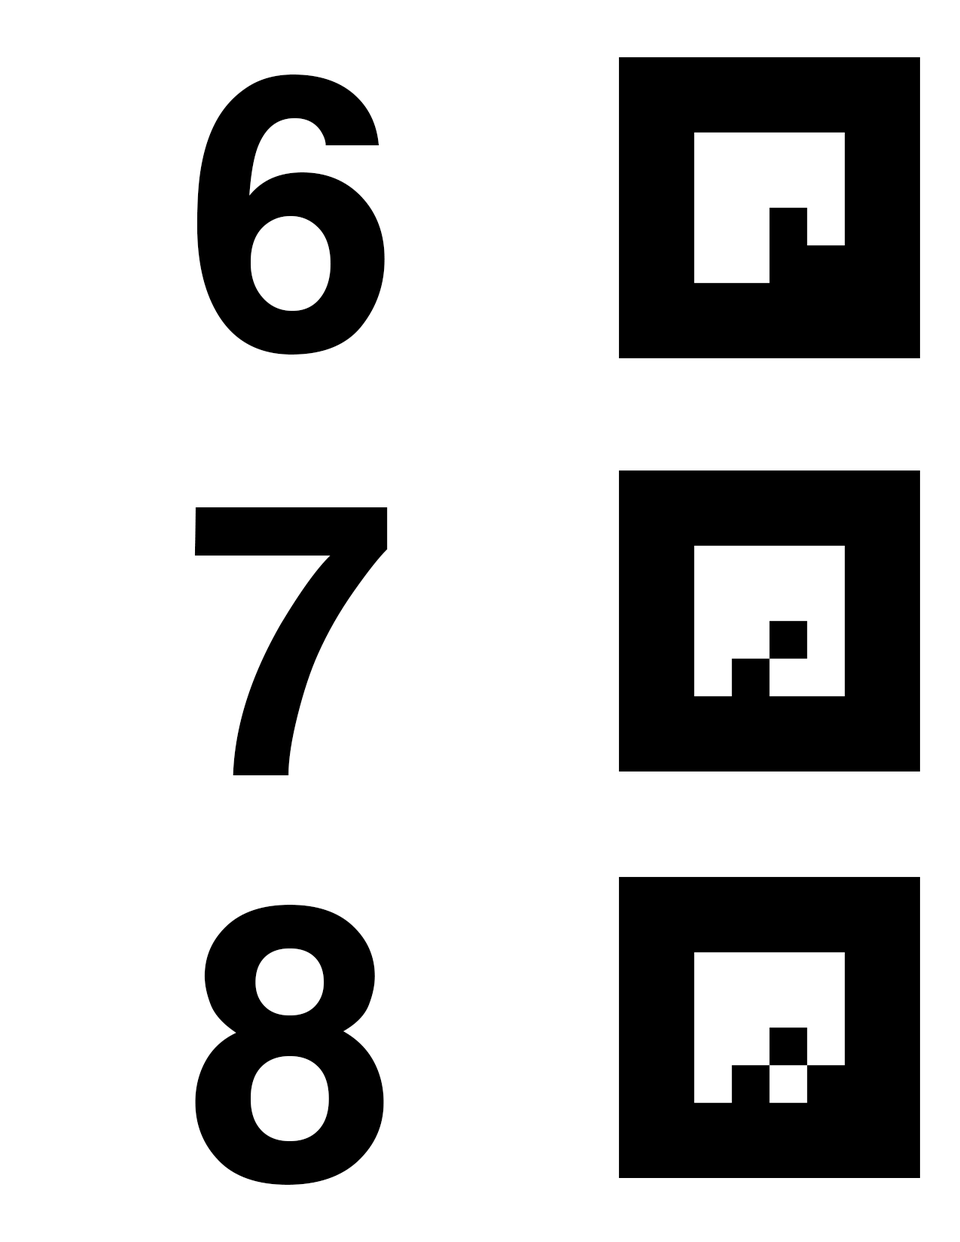
<style>
.page{position:relative;width:960px;height:1242px;background:#ffffff}
.page>*{position:absolute;margin:0}
.t1{font:382.7px "Helvetica-Bold";letter-spacing:0.01em;color:#000000}
</style>
<div class="page">
<p class="t1" style="left:196px;top:75px;width:189px;height:280px">6</p>
<p class="t1" style="left:194px;top:507px;width:194px;height:268px">7</p>
<p class="t1" style="left:195px;top:905px;width:189px;height:280px">8</p>
</div>
